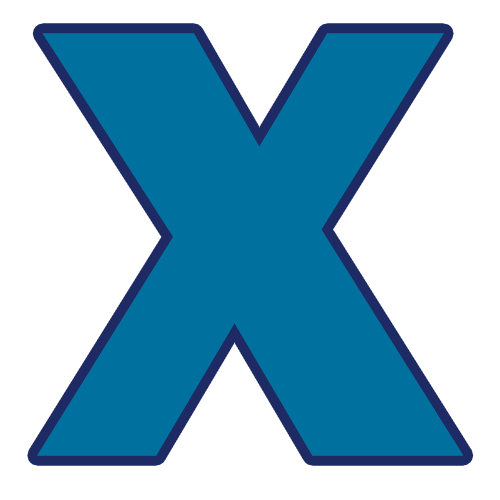
<style>
.page{position:relative;width:500px;height:500px;background:#ffffff}
.page>*{position:absolute;margin:0}
.t1{font:633.7px "FranklinGothic-Heavy";color:#00709e}
</style>
<div class="page">
<p class="t1" style="left:37px;top:33px;width:427px;height:423px">X</p>
</div>
